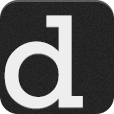
<style>
.page{position:relative;width:114px;height:114px;background:#eeeeee}
.page>*{position:absolute;margin:0}
.t1{font:134.8px "Rockwell";color:#eeeeee}
</style>
<div class="page">
<p class="t1" style="left:4px;top:15px;width:79px;height:94px">d</p>
</div>
